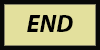
<style>
.page{position:relative;width:100px;height:50px;background:#e3e09d}
.page>*{position:absolute;margin:0}
.t1{font:25px "MyriadPro-BoldIt";color:#000000}
</style>
<div class="page">
<p class="t1" style="left:27px;top:15px;width:46px;height:17px">END</p>
</div>
